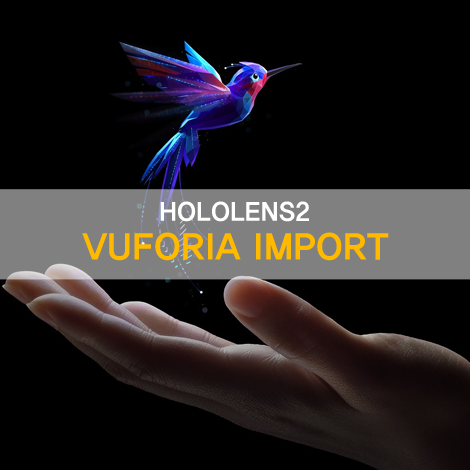
<style>
.page{position:relative;width:470px;height:470px;background:#000000}
.page>*{position:absolute;margin:0}
.t1{font:25px "YDIYGO350";color:#ffffff}
.t2{font:35px "YDIYGO350";color:#ffba00}
</style>
<div class="page">
<p class="t1" style="left:160px;top:201px;width:149px;height:21px">HOLOLENS2</p>
<p class="t2" style="left:82px;top:232px;width:307px;height:29px">VUFORIA IMPORT</p>
</div>
